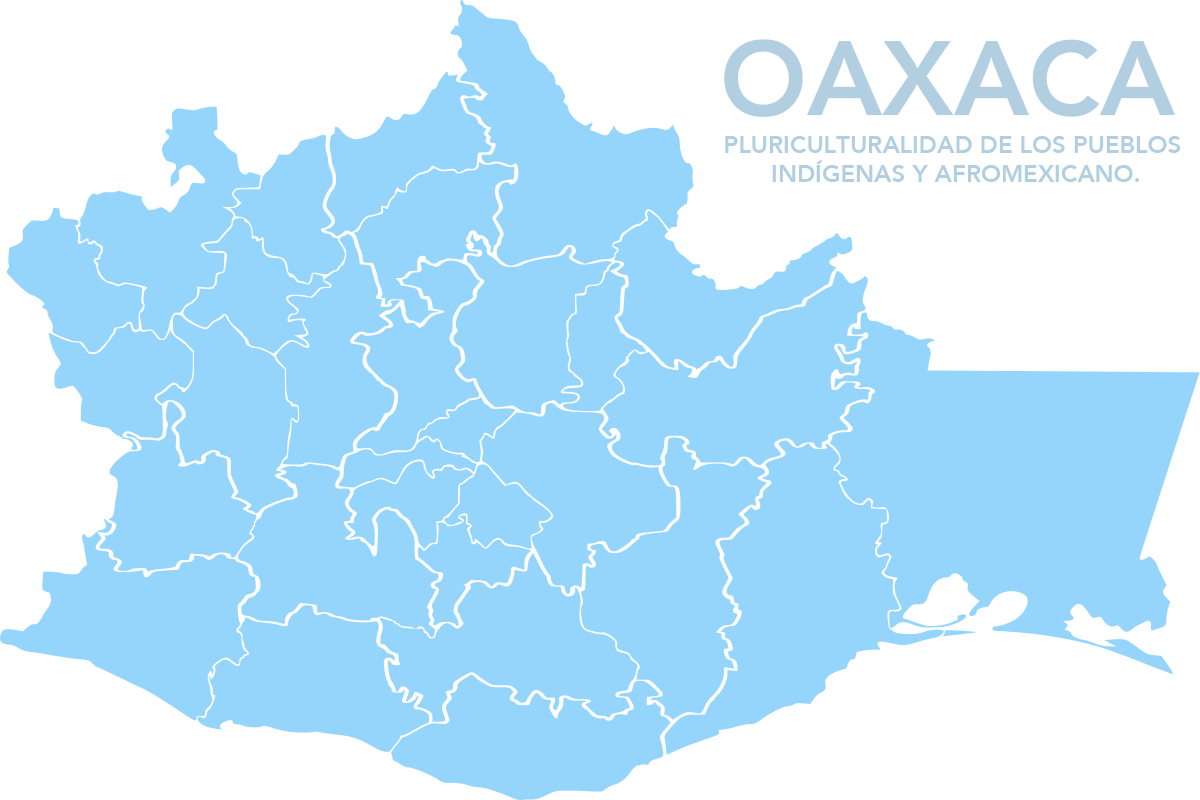
<style>
.page{position:relative;width:1200px;height:800px;background:#96d5fb}
.page>*{position:absolute;margin:0}
.t1{font:104.2px "Avenir-Heavy";color:#b1cfe1}
.t2{font:24px "Avenir-Heavy";color:#b1cfe1}
</style>
<div class="page">
<p class="t1" style="left:724px;top:39px;width:452px;height:78px">OAXACA</p>
<p class="t2" style="left:725px;top:136px;width:456px;height:46px;text-align:center">PLURICULTURALIDAD DE LOS PUEBLOS <br>INDÍGENAS Y AFROMEXICANO.</p>
</div>
